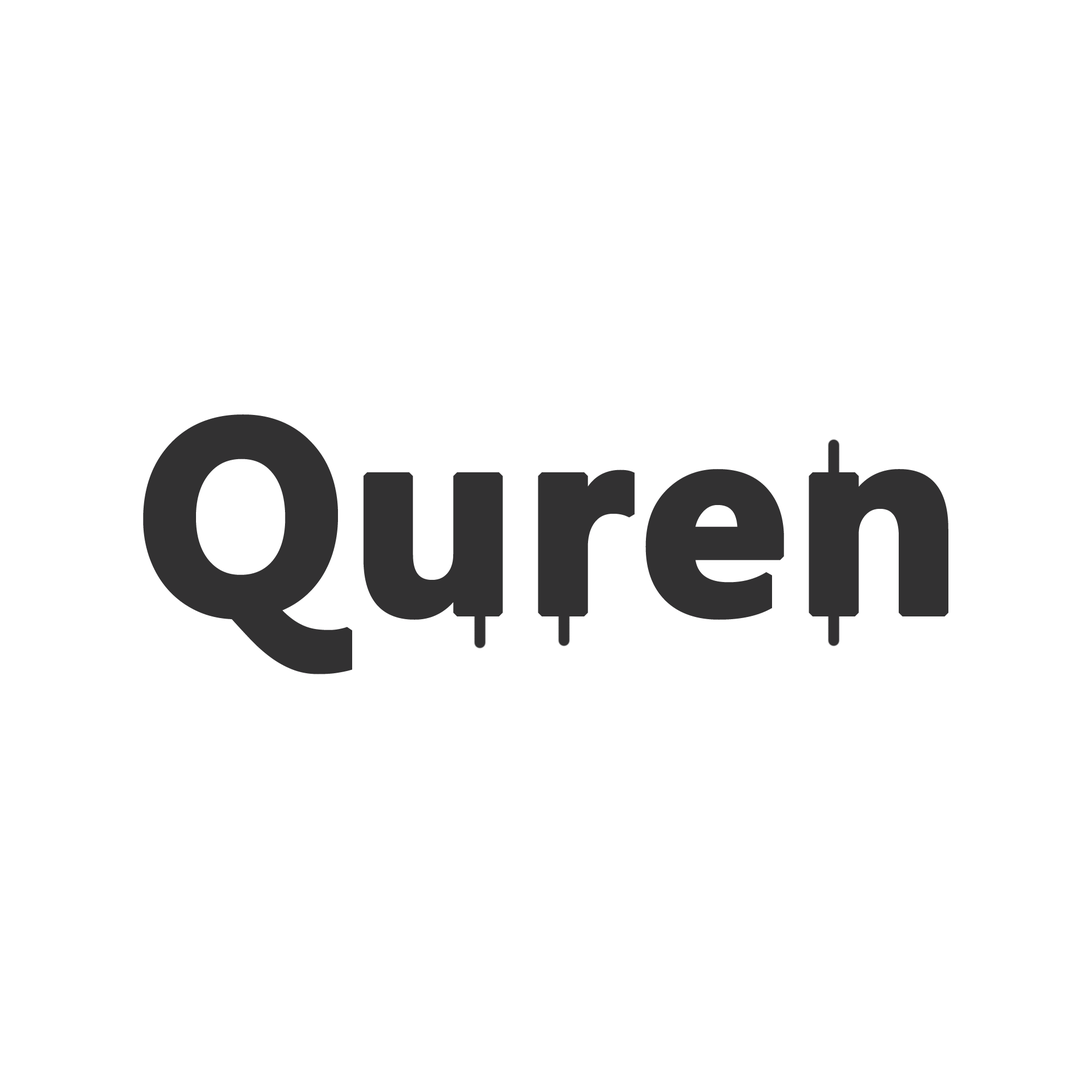
<style>
.page{position:relative;width:1092px;height:1092px;background:#ffffff}
.page>*{position:absolute;margin:0}
.t1{font:273px "Ebrima-Bold";color:#212021;font-weight:bold}
</style>
<div class="page">
<p class="t1" style="left:143px;top:414px;width:805px;height:260px">Quren</p>
</div>
